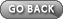
<style>
.page{position:relative;width:63px;height:19px}
.page>*{position:absolute;margin:0}
.t1{font:10px "MyriadWebPro";letter-spacing:0.06em;color:#ffffff;font-weight:bold}
</style>
<div class="page">
<p class="t1" style="left:8px;top:5px;width:46px;height:8px">GO BACK</p>
</div>
